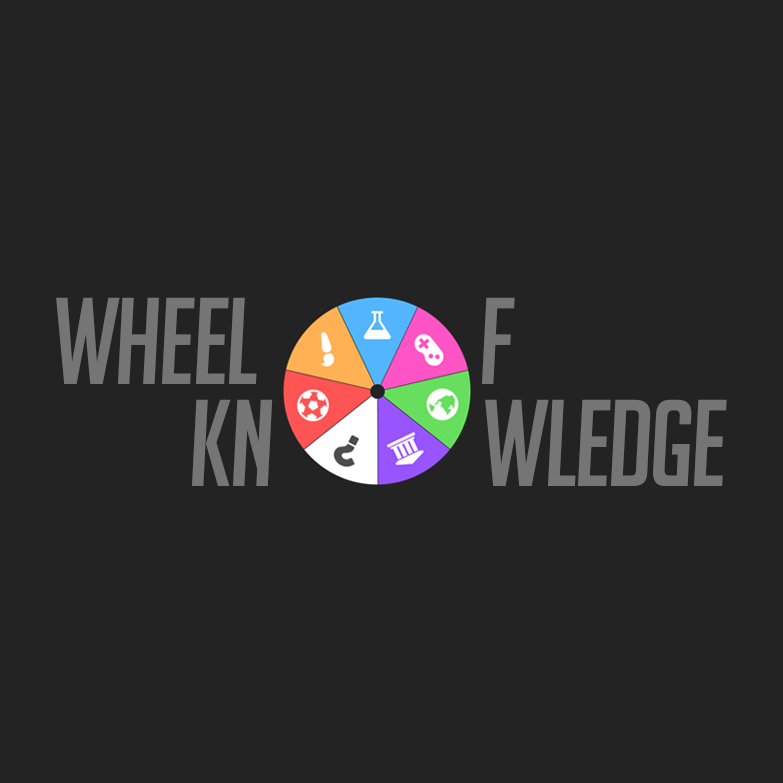
<style>
.page{position:relative;width:783px;height:783px;background:#232323}
.page>*{position:absolute;margin:0}
.t1{font:120px "BigNoodleTitling-Oblique";letter-spacing:-0.025em;color:#757575}
</style>
<div class="page">
<p class="t1" style="left:56px;top:297px;width:201px;height:87px">Wheel</p>
<p class="t1" style="left:482px;top:297px;width:33px;height:87px">F</p>
<p class="t1" style="left:192px;top:399px;width:81px;height:87px">Kn</p>
<p class="t1" style="left:485px;top:399px;width:242px;height:87px">wledge</p>
</div>
